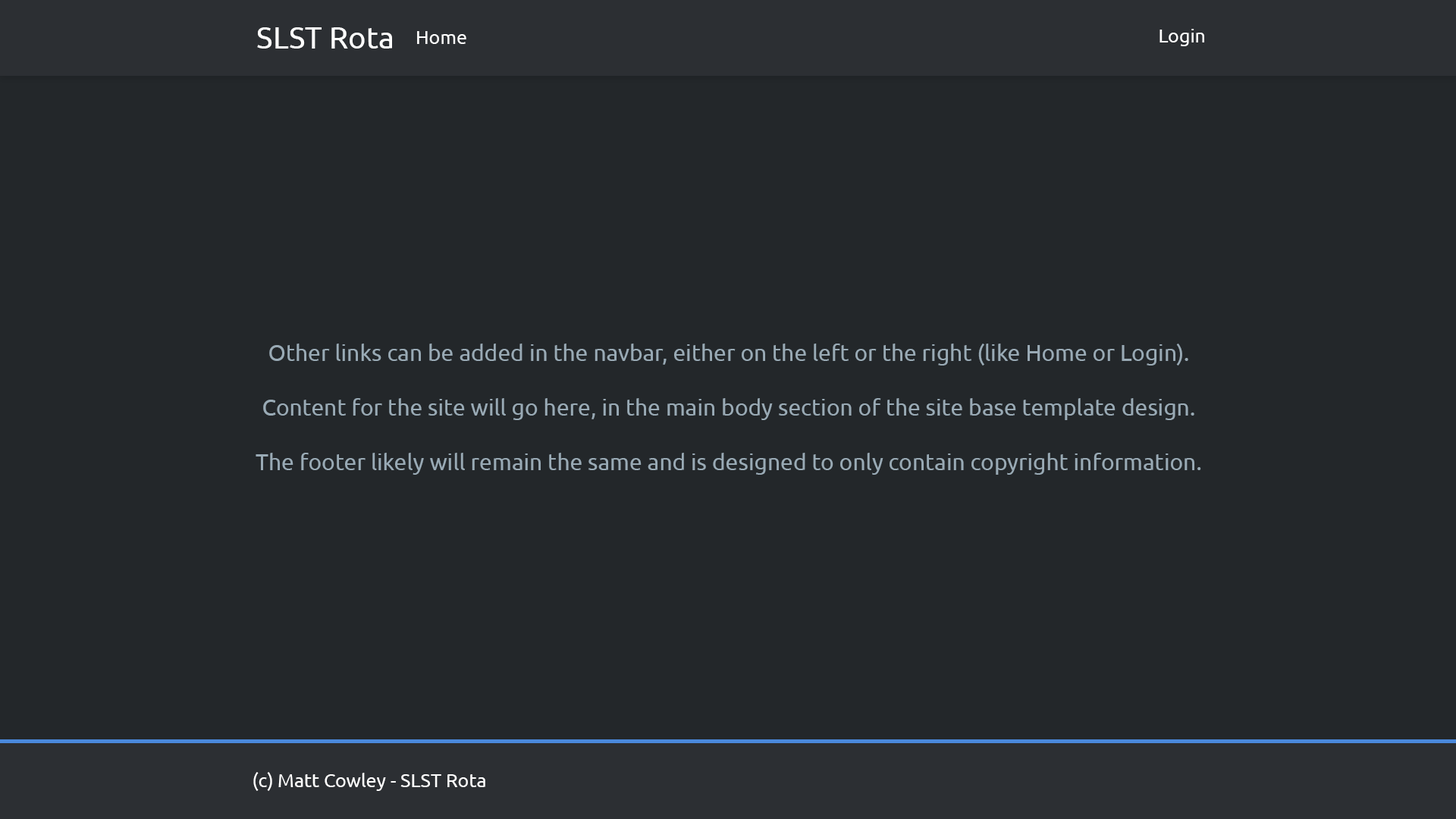
<style>
.page{position:relative;width:1456px;height:819px;background:#23272a}
.page>*{position:absolute;margin:0}
.t1{font:30.3px "Ubuntu";color:#ffffff}
.t2{font:30.3px "Ubuntu";color:#2c2f33}
.t3{font:19px "Ubuntu";color:#ffffff}
.t4{font:19px "Ubuntu";color:#2c2f33}
.t5{font:22.7px "Ubuntu";color:#99aab5}
</style>
<div class="page">
<p class="t1" style="left:243px;top:27px;width:165px;height:22px"><span class="t2">..</span>SLST Rota<span class="t2">..</span></p>
<p class="t3" style="left:1159px;top:29px;width:55px;height:17px">Login<span class="t4">..</span></p>
<p class="t3" style="left:406px;top:31px;width:60px;height:13px"><span class="t4">..</span>Home</p>
<p class="t5" style="left:256px;top:344px;width:945px;height:131px;text-align:center">Other links can be added in the navbar, either on the left or the right (like Home or Login).<br><br>Content for the site will go here, in the main body section of the site base template design.<br><br>The footer likely will remain the same and is designed to only contain copyright information.</p>
<p class="t3" style="left:243px;top:772px;width:242px;height:19px"><span class="t4">..</span>(c) Matt Cowley - SLST Rota</p>
</div>
